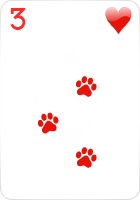
<style>
.page{position:relative;width:140px;height:200px;background:#ffffff}
.page>*{position:absolute;margin:0}
.t1{font:26px "CardCharacters";color:#ff2b2b}
</style>
<div class="page">
<p class="t1" style="left:10px;top:8px;width:16px;height:22px">3</p>
</div>
